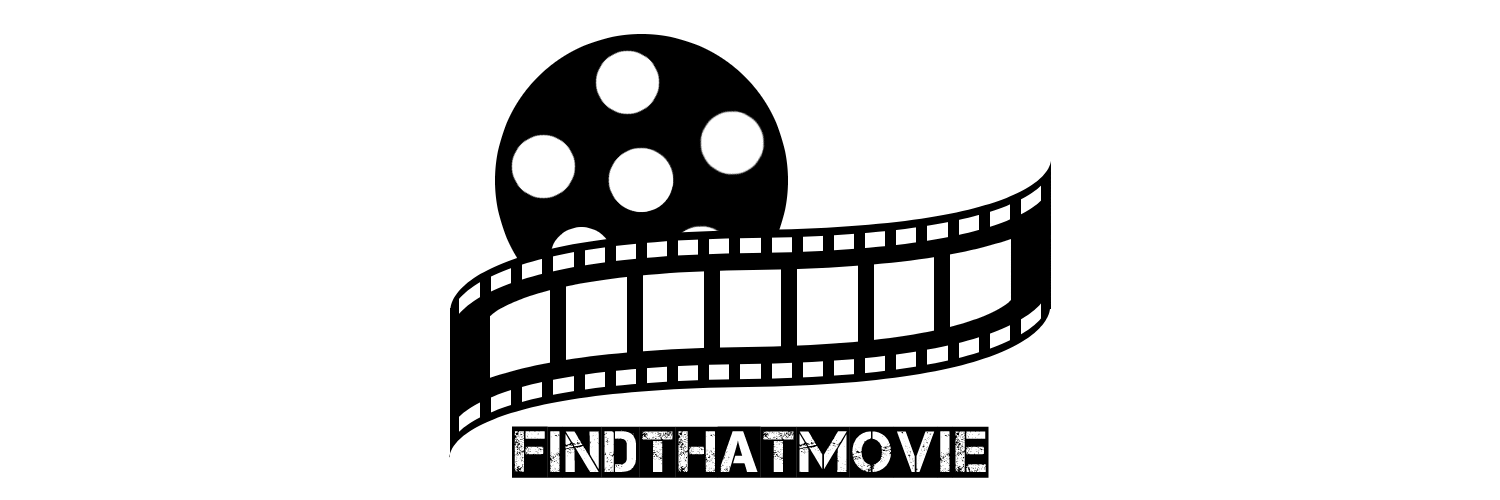
<style>
.page{position:relative;width:1500px;height:500px;background:#ffffff}
.page>*{position:absolute;margin:0}
.t1{font:58px "Captureit2";color:#000000}
</style>
<div class="page">
<p class="t1" style="left:511px;top:426px;width:478px;height:52px">FINDTHATMOVIE</p>
</div>
